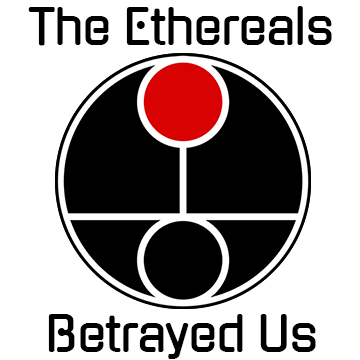
<style>
.page{position:relative;width:360px;height:360px;background:#ffffff}
.page>*{position:absolute;margin:0}
.t1{font:48px "Gugi-Regular";letter-spacing:-0.026em;color:#000000}
</style>
<div class="page">
<p class="t1" style="left:28px;top:6px;width:304px;height:40px">The Ethereals</p>
<p class="t1" style="left:48px;top:314px;width:268px;height:45px">Betrayed Us</p>
</div>
